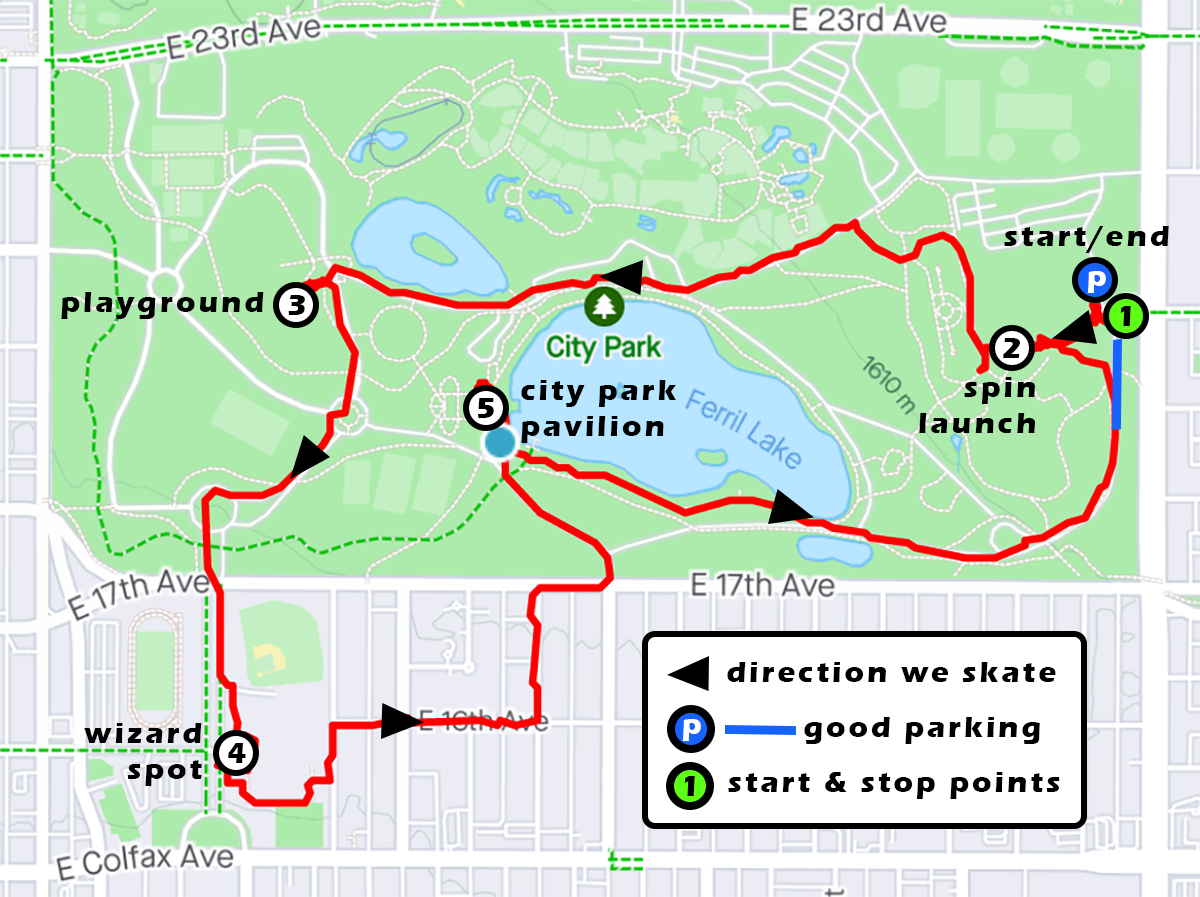
<style>
.page{position:relative;width:1200px;height:897px;background:#adebad}
.page>*{position:absolute;margin:0}
.t1{font:30px "ErasITC-Bold";letter-spacing:0.1em;color:#000000}
.t2{font:30px "ErasITC-Bold";letter-spacing:0.1em;color:#ffffff}
</style>
<div class="page">
<p class="t1" style="left:1004px;top:226px;width:165px;height:27px">start/end</p>
<p class="t2" style="left:1087px;top:271px;width:19px;height:22px">p</p>
<p class="t1" style="left:61px;top:292px;width:203px;height:27px">playground</p>
<p class="t1" style="left:288px;top:295px;width:17px;height:20px">3</p>
<p class="t1" style="left:1120px;top:306px;width:11px;height:20px">1</p>
<p class="t1" style="left:1003px;top:338px;width:17px;height:20px">2</p>
<p class="t1" style="left:919px;top:377px;width:116px;height:56px;text-align:right">spin<br>launch</p>
<p class="t1" style="left:521px;top:380px;width:155px;height:63px">city park<br>pavilion</p>
<p class="t1" style="left:478px;top:398px;width:16px;height:20px">5</p>
<p class="t1" style="left:727px;top:662px;width:329px;height:20px">direction we skate</p>
<p class="t1" style="left:84px;top:723px;width:118px;height:63px;text-align:right">wizard<br>spot</p>
<p class="t2" style="left:682px;top:719px;width:19px;height:22px">p</p>
<p class="t1" style="left:804px;top:717px;width:236px;height:27px">good parking</p>
<p class="t1" style="left:228px;top:743px;width:18px;height:20px">4</p>
<p class="t1" style="left:728px;top:772px;width:332px;height:27px">start &amp; stop points</p>
<p class="t1" style="left:684px;top:776px;width:11px;height:20px">1</p>
</div>
